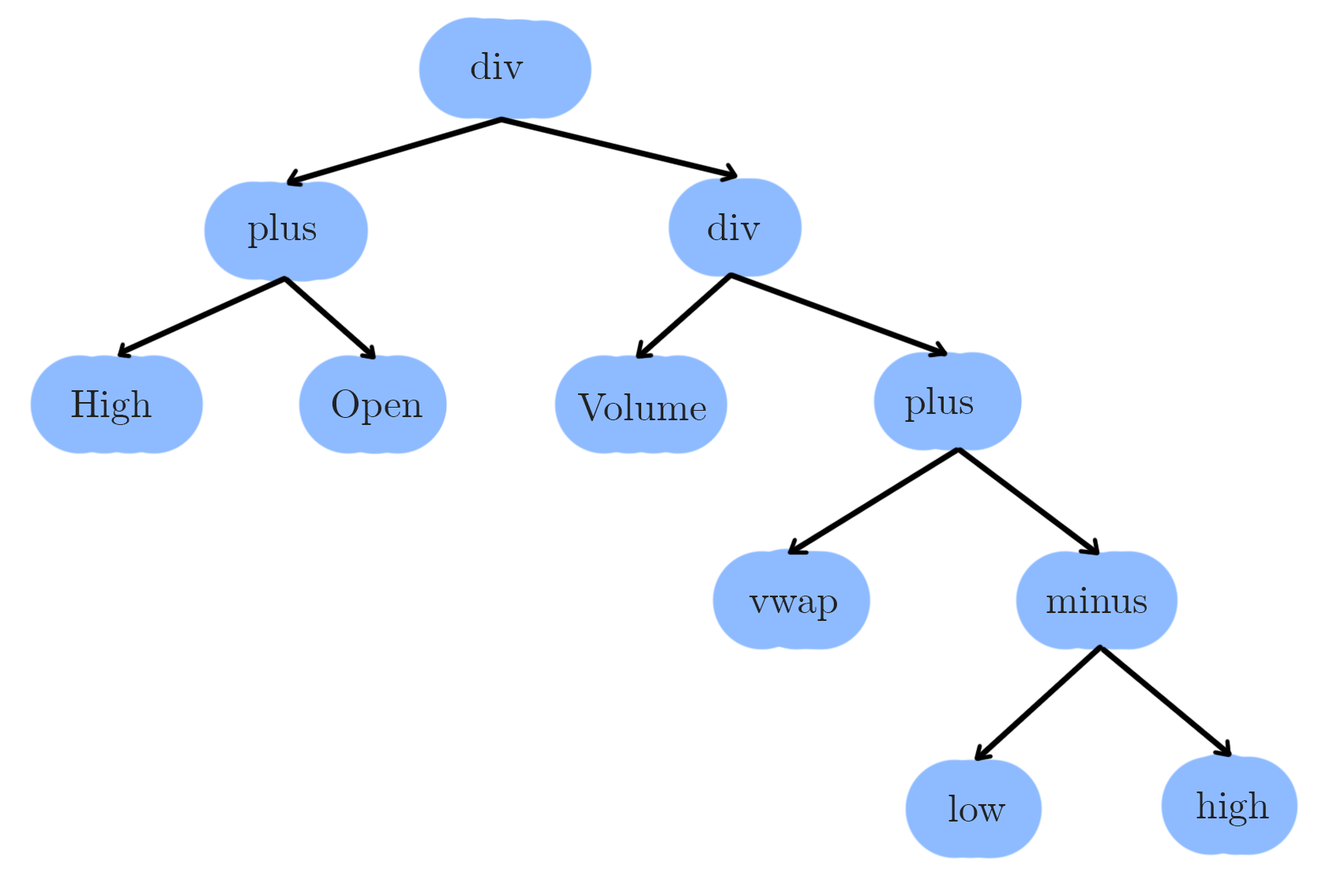
<style>
.page{position:relative;width:1333px;height:895px;background:#ffffff}
.page>*{position:absolute;margin:0}
.t1{font:39.5px "CMUSerif-Roman";color:#222222}
</style>
<div class="page">
<p class="t1" style="left:471px;top:52px;width:53px;height:27px">div</p>
<p class="t1" style="left:248px;top:213px;width:68px;height:35px">plus</p>
<p class="t1" style="left:707px;top:213px;width:53px;height:27px">div</p>
<p class="t1" style="left:332px;top:389px;width:90px;height:36px">Open</p>
<p class="t1" style="left:905px;top:387px;width:68px;height:35px">plus</p>
<p class="t1" style="left:71px;top:390px;width:81px;height:35px">High</p>
<p class="t1" style="left:578px;top:393px;width:128px;height:28px">Volume</p>
<p class="t1" style="left:1046px;top:587px;width:101px;height:26px">minus</p>
<p class="t1" style="left:749px;top:595px;width:88px;height:26px">vwap</p>
<p class="t1" style="left:948px;top:794px;width:58px;height:27px">low</p>
<p class="t1" style="left:1196px;top:791px;width:73px;height:35px">high</p>
</div>
